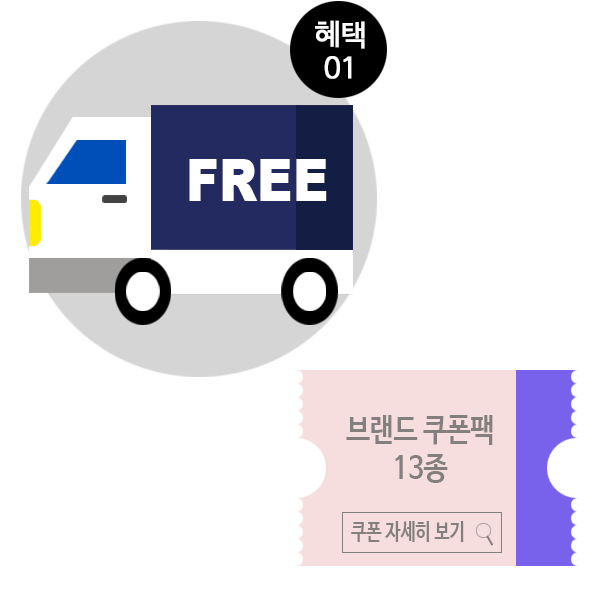
<style>
.page{position:relative;width:600px;height:600px;background:#ffffff}
.page>*{position:absolute;margin:0}
.t1{font:28.5px "NanumBarunGothic";letter-spacing:-0.05em;color:#ffffff;font-weight:bold;scale:1.04 1}
.t2{font:58.8px "Arial-Black";color:#ffffff;scale:0.84 1}
.t3{font:31.8px "NanumBarunGothicBold";color:#837f7e;scale:0.83 1}
.t4{font:23.1px "NanumBarunGothicBold";color:#837f7e;scale:0.74 1}
</style>
<div class="page">
<p class="t1" style="left:315px;top:20px;width:50px;height:59px;text-align:center">혜택<br>01</p>
<p class="t2" style="left:189px;top:159px;width:138px;height:42px">FREE</p>
<p class="t3" style="left:346px;top:415px;width:147px;height:68px;text-align:center">브랜드 쿠폰팩<br>13종</p>
<p class="t4" style="left:351px;top:521px;width:113px;height:21px">쿠폰 자세히 보기</p>
</div>
